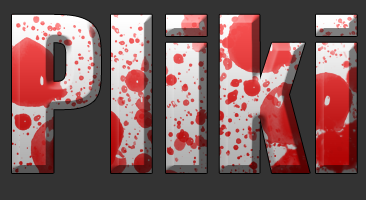
<style>
.page{position:relative;width:366px;height:200px;background:#333333}
.page>*{position:absolute;margin:0}
.t1{font:200px "Impact"}
</style>
<div class="page">
<p class="t1" style="left:12px;top:14px;width:345px;height:159px">Pliki</p>
</div>
